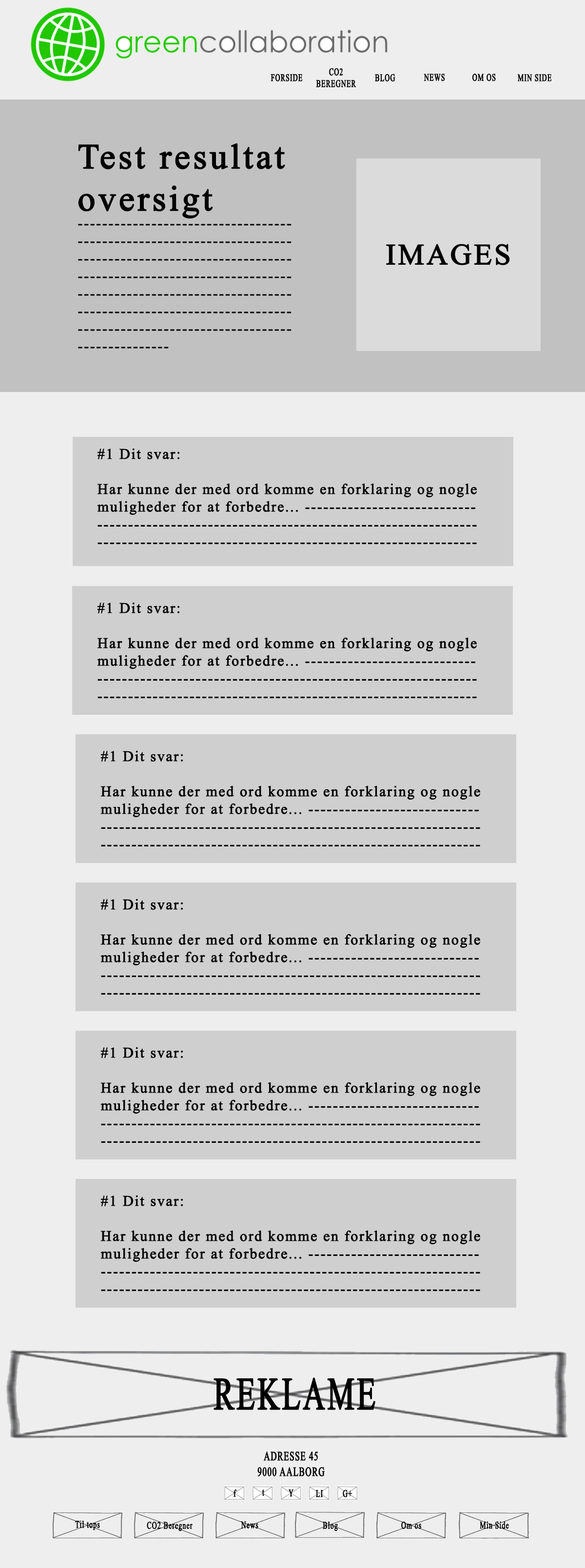
<style>
.page{position:relative;width:585px;height:1568px;background:#eeeeee}
.page>*{position:absolute;margin:0}
.t1{font:14.6px "TimesNewRomanPSMT";letter-spacing:0.06em;color:#020202;font-weight:bold}
.t2{font:35.1px "TimesNewRomanPSMT";letter-spacing:0.06em;color:#020202;font-weight:bold}
.t3{font:29.3px "TimesNewRomanPSMT";letter-spacing:0.06em;color:#020202;font-weight:bold}
</style>
<div class="page">
<p class="t1" style="left:78px;top:143px;width:214px;height:206px"><span class="t2">Test resultat<br>oversigt<br></span>-----------------------------------<br>-----------------------------------<br>-----------------------------------<br>-----------------------------------<br>-----------------------------------<br>-----------------------------------<br>-----------------------------------<br>---------------</p>
<p class="t3" style="left:386px;top:244px;width:124px;height:21px">IMAGES</p>
<p class="t1" style="left:97px;top:448px;width:380px;height:96px">#1 Dit svar:<br><br>Har kunne der med ord komme en forklaring og nogle<br>muligheder for at forbedre... ----------------------------<br>--------------------------------------------------------------<br>--------------------------------------------------------------</p>
<p class="t1" style="left:97px;top:602px;width:380px;height:96px">#1 Dit svar:<br><br>Har kunne der med ord komme en forklaring og nogle<br>muligheder for at forbedre... ----------------------------<br>--------------------------------------------------------------<br>--------------------------------------------------------------</p>
<p class="t1" style="left:100px;top:750px;width:380px;height:96px">#1 Dit svar:<br><br>Har kunne der med ord komme en forklaring og nogle<br>muligheder for at forbedre... ----------------------------<br>--------------------------------------------------------------<br>--------------------------------------------------------------</p>
<p class="t1" style="left:100px;top:899px;width:380px;height:96px">#1 Dit svar:<br><br>Har kunne der med ord komme en forklaring og nogle<br>muligheder for at forbedre... ----------------------------<br>--------------------------------------------------------------<br>--------------------------------------------------------------</p>
<p class="t1" style="left:100px;top:1047px;width:380px;height:96px">#1 Dit svar:<br><br>Har kunne der med ord komme en forklaring og nogle<br>muligheder for at forbedre... ----------------------------<br>--------------------------------------------------------------<br>--------------------------------------------------------------</p>
<p class="t1" style="left:100px;top:1195px;width:380px;height:96px">#1 Dit svar:<br><br>Har kunne der med ord komme en forklaring og nogle<br>muligheder for at forbedre... ----------------------------<br>--------------------------------------------------------------<br>--------------------------------------------------------------</p>
</div>
